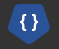
<style>
.page{position:relative;width:59px;height:49px;background:#333333}
.page>*{position:absolute;margin:0}
.t1{font:18px "ForteMT";color:#ffffff}
</style>
<div class="page">
<p class="t1" style="left:20px;top:14px;width:7px;height:17px">{</p>
<p class="t1" style="left:32px;top:14px;width:6px;height:17px">}</p>
</div>
